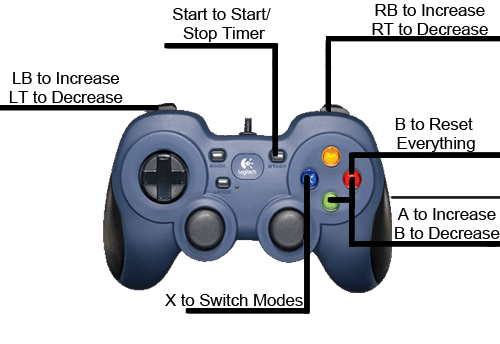
<style>
.page{position:relative;width:500px;height:344px;background:#ffffff}
.page>*{position:absolute;margin:0}
.t1{font:28.6px/19px "ArialMT";color:#000000}
.t2{font:28.6px "ArialMT";color:#000000}
</style>
<div class="page">
<p class="t1" style="left:372px;top:4px;width:116px;height:31px;text-align:center">RB to Increase<br>RT to Decrease</p>
<p class="t1" style="left:173px;top:8px;width:98px;height:34px;text-align:center">Start to Start/ <br>Stop Timer</p>
<p class="t1" style="left:9px;top:72px;width:114px;height:31px;text-align:center">LB to Increase<br>LT to Decrease</p>
<p class="t1" style="left:395px;top:118px;width:80px;height:34px;text-align:center">B to Reset <br>Everything</p>
<p class="t1" style="left:395px;top:208px;width:105px;height:31px;text-align:center">A to Increase<br>B to Decrease</p>
<p class="t2" style="left:165px;top:294px;width:138px;height:12px">X to Switch Modes</p>
</div>
